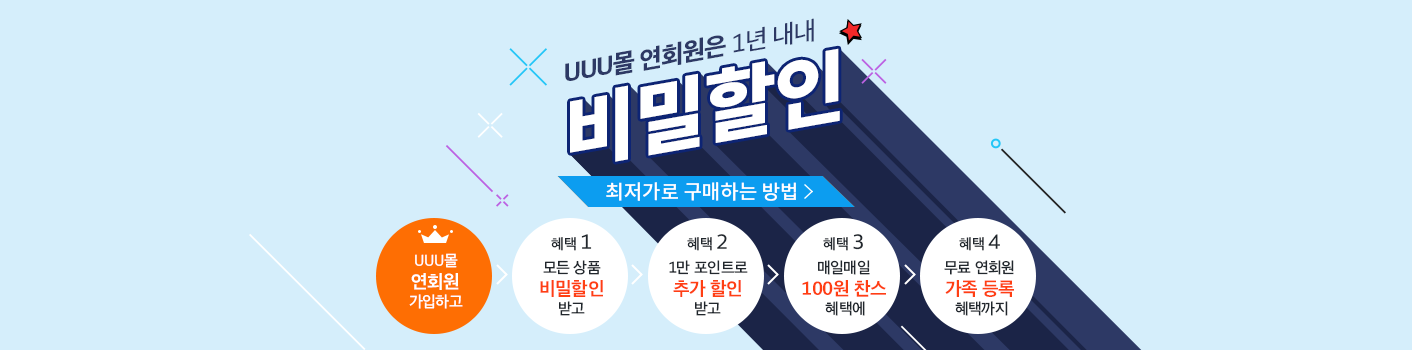
<style>
.page{position:relative;width:1412px;height:350px;background:#d5eefb}
.page>*{position:absolute;margin:0}
.t1{font:24.6px "SDGothicNeoaUniTTF-hEb";letter-spacing:-0.05em;color:#2d3965}
.t2{font:24.6px "SDGothicNeoaUniTTF-eMd";letter-spacing:-0.05em;color:#2d3965}
.t3{font:78.2px "NotoSansCJKkr-Black";letter-spacing:-0.025em;color:#ffffff}
.t4{font:20px "NotoSansCJKkr-Medium";color:#ffffff}
.t5{font:14px "SDGothicNeoaUni-eMd";letter-spacing:-0.025em;color:#21272d}
.t6{font:20px "SDGothicNeoaUni-eMd";letter-spacing:-0.025em;color:#21272d}
.t7{font:15px/20px "SDGothicNeoaUni-eMd";letter-spacing:-0.025em;color:#ffffff}
.t8{font:18px/21px "SDGothicNeoaUni-gBd";letter-spacing:-0.025em;color:#ffffff}
.t9{font:15px/21px "SDGothicNeoaUni-eMd";letter-spacing:-0.025em;color:#ffffff}
.t10{font:15px/20px "SDGothicNeoaUni-eMd";letter-spacing:-0.025em;color:#21272d}
.t11{font:18px/21px "SDGothicNeoaUni-gBd";letter-spacing:-0.025em;color:#ff3f13}
.t12{font:15px/21px "SDGothicNeoaUni-eMd";letter-spacing:-0.025em;color:#21272d}
</style>
<div class="page">
<p class="t1" style="left:565px;top:18px;width:249px;height:63px;rotate:-10deg">UUU몰 연회원은 <span class="t2">1년 내내</span></p>
<p class="t3" style="left:570px;top:48px;width:270px;height:114px;rotate:-10deg">비밀할인</p>
<p class="t4" style="left:606px;top:182px;width:190px;height:19px">최저가로 구매하는 방법</p>
<p class="t4" style="left:606px;top:182px;width:190px;height:19px">최저가로 구매하는 방법</p>
<p class="t5" style="left:551px;top:234px;width:41px;height:17px">혜택 <span class="t6">1</span></p>
<p class="t5" style="left:687px;top:234px;width:40px;height:17px">혜택 <span class="t6">2</span></p>
<p class="t5" style="left:823px;top:234px;width:40px;height:17px">혜택 <span class="t6">3</span></p>
<p class="t5" style="left:959px;top:234px;width:41px;height:17px">혜택 <span class="t6">4</span></p>
<p class="t7" style="left:409px;top:253px;width:54px;height:56px;text-align:center">UUU몰<br><span class="t8">연회원<br></span><span class="t9">가입하고</span></p>
<p class="t10" style="left:540px;top:260px;width:63px;height:56px;text-align:center">모든 상품<br><span class="t11">비밀할인<br></span><span class="t12">받고</span></p>
<p class="t10" style="left:669px;top:260px;width:79px;height:56px;text-align:center">1만 포인트로<br><span class="t11">추가 할인<br></span><span class="t12">받고</span></p>
<p class="t11" style="left:802px;top:260px;width:84px;height:56px;text-align:center"><span class="t10">매일매일<br></span>100원 찬스<br><span class="t12"> 혜택에</span></p>
<p class="t10" style="left:944px;top:260px;width:70px;height:56px;text-align:center">무료 연회원<br><span class="t11">가족 등록<br></span><span class="t12"> 혜택까지</span></p>
</div>
